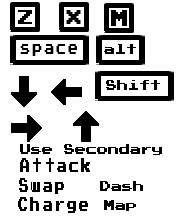
<style>
.page{position:relative;width:178px;height:216px;background:#ffffff}
.page>*{position:absolute;margin:0}
.t1{font:16px "PressStart2P";letter-spacing:0.22em;color:#000000}
.t2{font:18px "PressStart2P";color:#000000}
.t3{font:16px "PressStart2P";letter-spacing:0.22em;color:#000000;scale:0.61 1}
.t4{font:11px "PressStart2P";color:#000000}
</style>
<div class="page">
<p class="t1" style="left:18px;top:10px;width:14px;height:14px">Z</p>
<p class="t1" style="left:66px;top:10px;width:15px;height:14px">X</p>
<p class="t2" style="left:111px;top:10px;width:16px;height:16px">M</p>
<p class="t3" style="left:20px;top:44px;width:57px;height:12px">space</p>
<p class="t4" style="left:104px;top:44px;width:32px;height:10px">alt</p>
<p class="t4" style="left:106px;top:80px;width:54px;height:10px">Shift</p>
<p class="t4" style="left:20px;top:144px;width:142px;height:11px">Use Secondary</p>
<p class="t3" style="left:20px;top:158px;width:70px;height:14px">Attack</p>
<p class="t3" style="left:19px;top:178px;width:45px;height:16px">Swap</p>
<p class="t4" style="left:100px;top:181px;width:43px;height:10px">Dash</p>
<p class="t3" style="left:18px;top:197px;width:70px;height:16px">Charge</p>
<p class="t4" style="left:104px;top:200px;width:32px;height:11px">Map</p>
</div>
